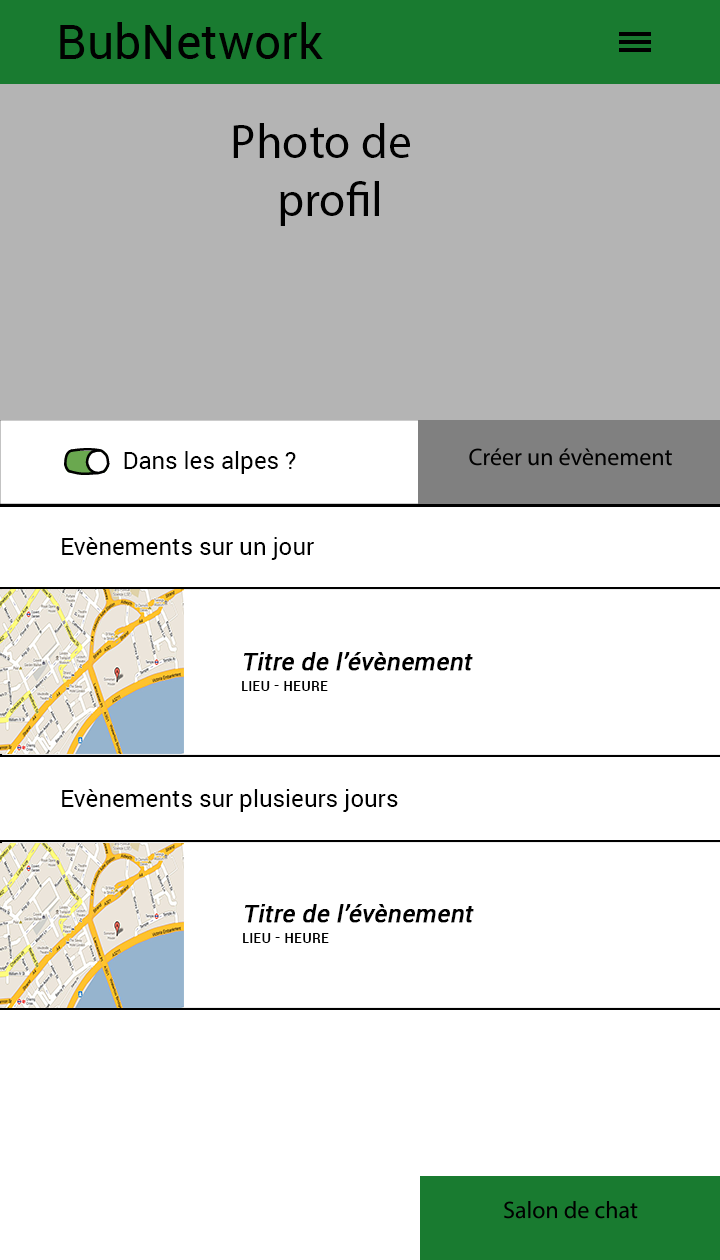
<style>
.page{position:relative;width:720px;height:1260px;background:#ffffff}
.page>*{position:absolute;margin:0}
.t1{font:48px "Roboto-Regular";color:#010101}
.t2{font:48px "MyriadPro-Regular";color:#000000}
.t3{font:24px "Roboto-Regular";color:#000000}
.t4{font:24px "Roboto-Regular";color:#000000;font-weight:bold;font-style:italic}
.t5{font:18px "RobotoCondensed-Regular";color:#000000;font-variant:small-caps}
</style>
<div class="page">
<p class="t1" style="left:60px;top:22px;width:263px;height:37px">BubNetwork</p>
<p class="t2" style="left:233px;top:123px;width:177px;height:103px;text-align:center">Photo de profil</p>
<p class="t3" style="left:124px;top:451px;width:172px;height:23px">Dans les alpes ?</p>
<p class="t3" style="left:62px;top:537px;width:252px;height:23px">Evènements sur un jour</p>
<p class="t4" style="left:242px;top:652px;width:231px;height:39px">Titre de l’évènement<br><span class="t5">Lieu - Heure</span></p>
<p class="t3" style="left:62px;top:789px;width:336px;height:23px">Evènements sur plusieurs jours</p>
<p class="t4" style="left:243px;top:904px;width:231px;height:39px">Titre de l’évènement<br><span class="t5">Lieu - Heure</span></p>
</div>
